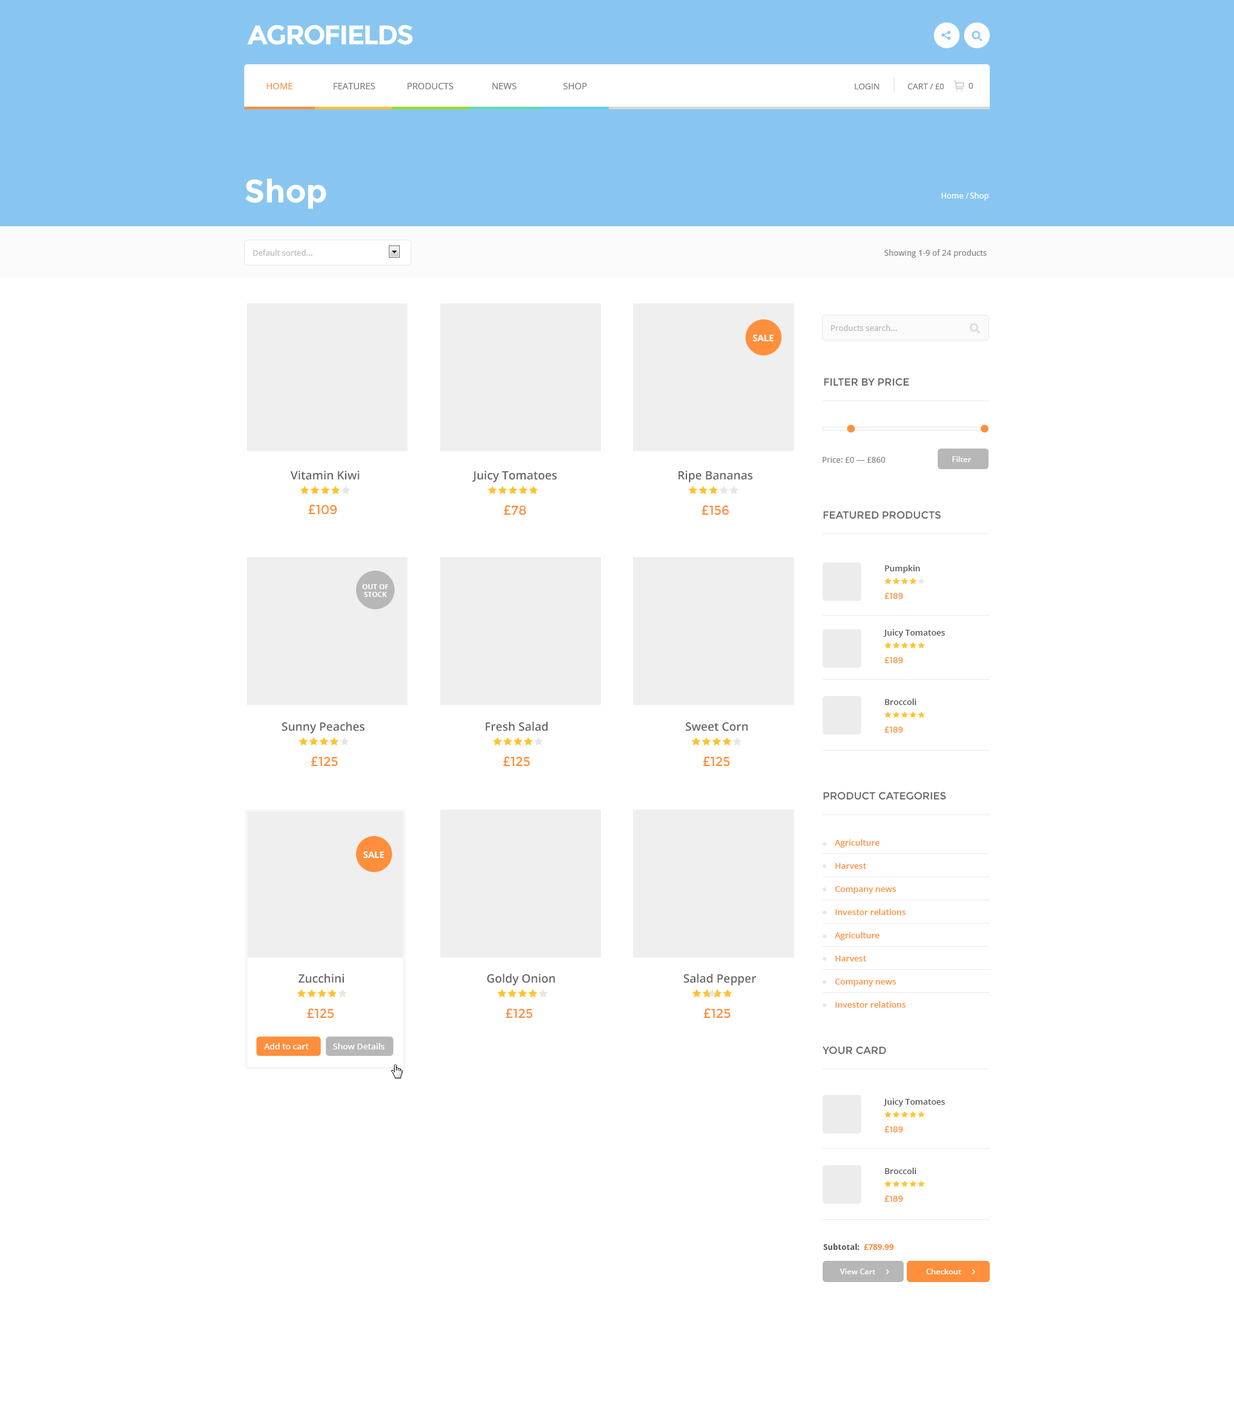
<style>
.page{position:relative;width:1234px;height:1426px;background:#ffffff}
.page>*{position:absolute;margin:0}
.t1{font:27px "Montserrat-Bold";letter-spacing:-0.05em;color:#ffffff;text-transform:uppercase}
.t2{font:9px "OpenSans";color:#ff8f3c;text-transform:uppercase}
.t3{font:9px "OpenSans";color:#767676;text-transform:uppercase}
.t4{font:8.4px "OpenSans";color:#767676;text-transform:uppercase}
.t5{font:7.7px "OpenSans";color:#767676;text-transform:uppercase}
.t6{font:32.1px "Montserrat-Bold";color:#ffffff}
.t7{font:8.4px "DroidSans";color:#ffffff}
.t8{font:8.4px "DroidSans";color:#bcbcbc}
.t9{font:8.4px "DroidSans";color:#838383}
.t10{font:8.4px "DroidSans";color:#b8b8b8}
.t11{font:9px "OpenSans-Bold";color:#ffffff;text-transform:uppercase}
.t12{font:10.3px "Montserrat-Regular";color:#656565;text-transform:uppercase}
.t13{font:7.7px "OpenSans-Semibold";color:#ffffff}
.t14{font:11.6px "OpenSans-Semibold";color:#656565}
.t15{font:12.9px "Montserrat-Regular";color:#ff8f3c}
.t16{font:8.4px "OpenSans-Semibold";color:#565656}
.t17{font:7.1px/7.7px "OpenSans-Bold";color:#ffffff;text-transform:uppercase}
.t18{font:8.4px "Montserrat-Regular";color:#ff8f3c}
.t19{font:8.4px/23.1px "OpenSans-Semibold";color:#ff8f3c}
.t20{font:9px "NotoSans-Bold";color:#ffffff;text-transform:uppercase}
.t21{font:8.4px "OpenSans-Semibold";color:#ffffff}
.t22{font:8.4px "DroidSans-Bold";color:#565656}
.t23{font:8.4px "DroidSans-Bold";color:#ff8f3c;text-transform:uppercase}
</style>
<div class="page">
<p class="t1" style="left:247px;top:25px;width:166px;height:20px">Agrofields</p>
<p class="t2" style="left:267px;top:83px;width:25px;height:6px">Home</p>
<p class="t3" style="left:334px;top:83px;width:41px;height:6px">Features</p>
<p class="t3" style="left:408px;top:83px;width:46px;height:6px">Products</p>
<p class="t3" style="left:492px;top:83px;width:25px;height:6px">News</p>
<p class="t3" style="left:563px;top:83px;width:24px;height:6px">Shop</p>
<p class="t4" style="left:855px;top:84px;width:24px;height:5px">Login</p>
<p class="t4" style="left:908px;top:84px;width:36px;height:5px">cart / <span class="t5">£0</span></p>
<p class="t4" style="left:969px;top:83px;width:4px;height:6px">0</p>
<p class="t6" style="left:245px;top:179px;width:82px;height:30px">Shop</p>
<p class="t7" style="left:942px;top:193px;width:27px;height:6px">Home /</p>
<p class="t7" style="left:970px;top:192px;width:19px;height:9px">Shop</p>
<p class="t8" style="left:253px;top:249px;width:59px;height:7px">Default sorted...</p>
<p class="t9" style="left:885px;top:249px;width:102px;height:9px">Showing 1-9 of 24 products</p>
<p class="t10" style="left:831px;top:325px;width:66px;height:6px">Products search...</p>
<p class="t11" style="left:753px;top:334px;width:21px;height:8px">Sale</p>
<p class="t12" style="left:824px;top:378px;width:86px;height:8px">Filter by price</p>
<p class="t9" style="left:823px;top:457px;width:63px;height:6px">Price: £0 — £860</p>
<p class="t13" style="left:953px;top:456px;width:18px;height:6px">Filter</p>
<p class="t14" style="left:291px;top:471px;width:68px;height:9px">Vitamin Kiwi</p>
<p class="t14" style="left:472px;top:471px;width:85px;height:12px">Juicy Tomatoes</p>
<p class="t14" style="left:678px;top:471px;width:75px;height:12px">Ripe Bananas</p>
<p class="t15" style="left:309px;top:505px;width:28px;height:10px">£109</p>
<p class="t15" style="left:504px;top:505px;width:22px;height:11px">£78</p>
<p class="t15" style="left:702px;top:505px;width:27px;height:11px">£156</p>
<p class="t12" style="left:824px;top:511px;width:117px;height:8px">Featured Products</p>
<p class="t16" style="left:885px;top:565px;width:36px;height:8px">Pumpkin</p>
<p class="t17" style="left:363px;top:584px;width:26px;height:13px;text-align:center">Out of<br>stock</p>
<p class="t18" style="left:885px;top:593px;width:18px;height:7px">£189</p>
<p class="t16" style="left:883px;top:629px;width:62px;height:9px">Juicy Tomatoes</p>
<p class="t18" style="left:885px;top:657px;width:18px;height:7px">£189</p>
<p class="t16" style="left:885px;top:699px;width:32px;height:6px">Broccoli</p>
<p class="t14" style="left:282px;top:722px;width:82px;height:12px">Sunny Peaches</p>
<p class="t14" style="left:485px;top:722px;width:63px;height:10px">Fresh Salad</p>
<p class="t14" style="left:686px;top:723px;width:62px;height:9px">Sweet Corn</p>
<p class="t18" style="left:885px;top:726px;width:18px;height:8px">£189</p>
<p class="t15" style="left:311px;top:757px;width:27px;height:10px">£125</p>
<p class="t15" style="left:503px;top:757px;width:27px;height:10px">£125</p>
<p class="t15" style="left:703px;top:757px;width:27px;height:10px">£125</p>
<p class="t12" style="left:824px;top:792px;width:122px;height:8px">Product Categories</p>
<p class="t19" style="left:835px;top:840px;width:71px;height:75px">Agriculture<br>Harvest<br>Company news<br>Investor relations<br>Site map</p>
<p class="t20" style="left:363px;top:851px;width:21px;height:8px">Sale</p>
<p class="t19" style="left:835px;top:932px;width:71px;height:76px">Agriculture<br>Harvest<br>Company news<br>Investor relations<br>Site map</p>
<p class="t14" style="left:298px;top:974px;width:47px;height:10px">Zucchini</p>
<p class="t14" style="left:487px;top:974px;width:68px;height:12px">Goldy Onion</p>
<p class="t14" style="left:684px;top:974px;width:73px;height:12px">Salad Pepper</p>
<p class="t15" style="left:307px;top:1009px;width:27px;height:10px">£125</p>
<p class="t15" style="left:506px;top:1009px;width:27px;height:10px">£125</p>
<p class="t15" style="left:704px;top:1009px;width:27px;height:10px">£125</p>
<p class="t21" style="left:264px;top:1043px;width:45px;height:7px">Add to cart</p>
<p class="t21" style="left:333px;top:1043px;width:51px;height:7px">Show Details</p>
<p class="t12" style="left:822px;top:1047px;width:65px;height:8px">Your Card</p>
<p class="t16" style="left:883px;top:1099px;width:62px;height:8px">Juicy Tomatoes</p>
<p class="t18" style="left:885px;top:1126px;width:18px;height:7px">£189</p>
<p class="t16" style="left:885px;top:1168px;width:32px;height:6px">Broccoli</p>
<p class="t18" style="left:885px;top:1196px;width:18px;height:7px">£189</p>
<p class="t22" style="left:824px;top:1244px;width:36px;height:6px">Subtotal:</p>
<p class="t23" style="left:864px;top:1245px;width:30px;height:5px">£789.99</p>
<p class="t13" style="left:840px;top:1269px;width:36px;height:6px">View Cart</p>
<p class="t13" style="left:926px;top:1269px;width:36px;height:6px">Checkout</p>
</div>
